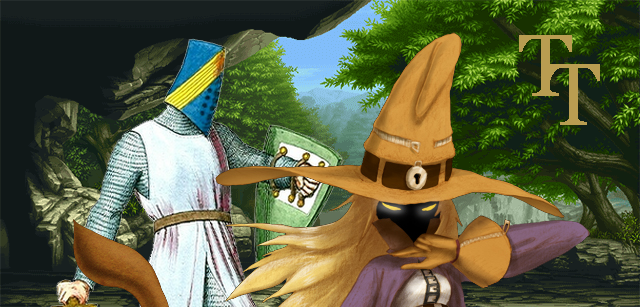
<style>
.page{position:relative;width:640px;height:307px}
.page>*{position:absolute;margin:0}
.t1{font:150.7px "Georgia";color:#b99d51}
</style>
<div class="page">
<p class="t1" style="left:519px;top:35px;width:53px;height:61px">T</p>
<p class="t1" style="left:547px;top:64px;width:53px;height:61px">T</p>
</div>
